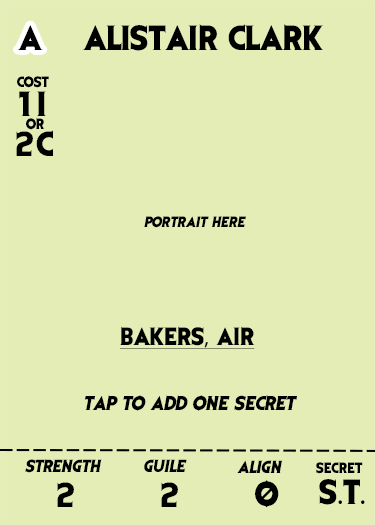
<style>
.page{position:relative;width:375px;height:525px;background:#e3edb5}
.page>*{position:absolute;margin:0}
.t1{font:29.2px "EvilDead";color:#000000}
.t2{font:12.5px "EvilDead";color:#000000}
.t3{font:12.5px "EvilDead";color:#000000;font-style:italic}
.t4{font:20.8px "EvilDead";color:#000000;text-decoration:underline}
.t5{font:20.8px "MyriadPro-Regular";color:#000000;text-decoration:underline}
.t6{font:16.7px "EvilDead";color:#000000;font-style:italic}
.t7{font:14.6px "EvilDead";color:#000000;font-style:italic}
.t8{font:29.2px "MyriadPro-Regular";color:#000000}
</style>
<div class="page">
<p class="t1" style="left:17px;top:25px;width:26px;height:25px">A</p>
<p class="t1" style="left:82px;top:24px;width:242px;height:27px">ALISTAIR CLARK</p>
<p class="t2" style="left:17px;top:76px;width:32px;height:12px">cost</p>
<p class="t1" style="left:19px;top:91px;width:27px;height:25px">1I</p>
<p class="t2" style="left:26px;top:117px;width:19px;height:13px">or</p>
<p class="t1" style="left:16px;top:130px;width:37px;height:26px">2C</p>
<p class="t3" style="left:144px;top:216px;width:102px;height:12px">PORTRAIT HERE</p>
<p class="t4" style="left:120px;top:326px;width:135px;height:23px">BAKERS<span class="t5">,</span> AIR</p>
<p class="t6" style="left:84px;top:395px;width:213px;height:16px">Tap to add one secret</p>
<p class="t7" style="left:25px;top:459px;width:77px;height:14px">Strength</p>
<p class="t7" style="left:144px;top:459px;width:43px;height:13px">GUILE</p>
<p class="t7" style="left:237px;top:460px;width:46px;height:13px">ALIGN</p>
<p class="t2" style="left:316px;top:461px;width:47px;height:13px">SECRET</p>
<p class="t1" style="left:57px;top:482px;width:17px;height:25px">2</p>
<p class="t1" style="left:161px;top:482px;width:17px;height:25px">2</p>
<p class="t1" style="left:255px;top:480px;width:24px;height:28px">0</p>
<p class="t1" style="left:319px;top:479px;width:46px;height:26px">S<span class="t8">.</span>T<span class="t8">.</span></p>
</div>
